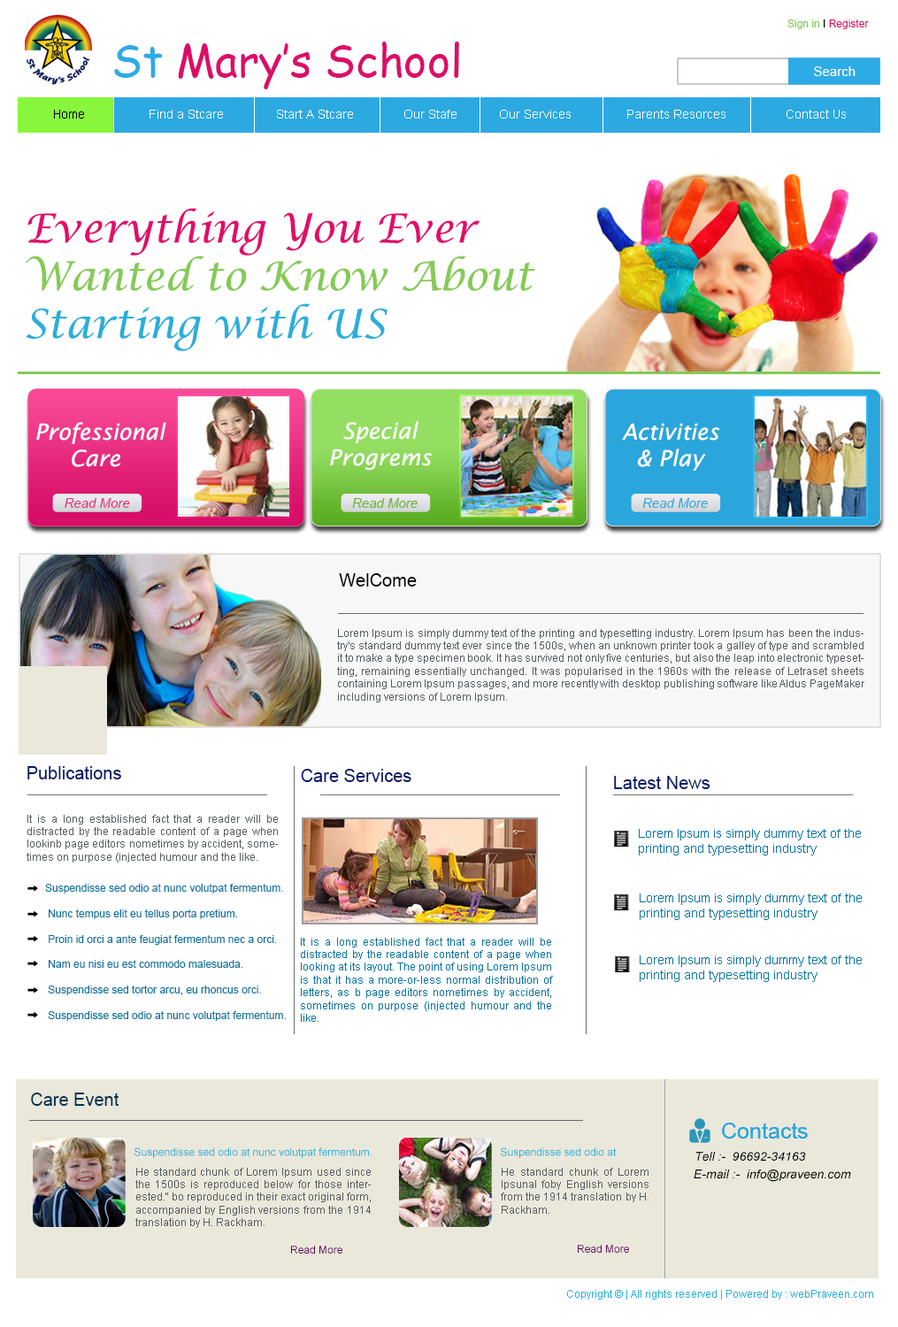
<style>
.page{position:relative;width:898px;height:1327px;background:#ffffff}
.page>*{position:absolute;margin:0}
.t1{font:10.6px "ArialMT";color:#e20d6a}
.t2{font:10.6px "ArialMT";color:#85ca55}
.t3{font:10.6px "ArialMT";color:#020400}
.t4{font:44.2px "ComicSansMS";color:#dc0d68}
.t5{font:44.2px "ComicSansMS";color:#2dabe6}
.t6{font:13.3px "ArialMT";color:#ffffff}
.t7{font:12.4px "ArialMT";color:#ffffff}
.t8{font:12.4px "ArialMT";color:#000000}
.t9{font:39.8px "LucidaCalligraphy-Italic";color:#85ca55}
.t10{font:39.8px "LucidaCalligraphy-Italic";color:#e20d6a}
.t11{font:39.8px "LucidaCalligraphy-Italic";color:#2aafda}
.t12{font:22.1px "LucidaSans-Italic";color:#ffffff}
.t13{font:13.3px "Arial-ItalicMT";color:#e72b7e}
.t14{font:13.3px "Arial-ItalicMT";color:#64b52c}
.t15{font:13.3px "Arial-ItalicMT";color:#2aa6dc}
.t16{font:17.7px "ArialMT";color:#000000}
.t17{font:10.6px "ArialMT";color:#595d5f}
.t18{font:17.7px "ArialMT";color:#031868}
.t19{font:12.4px "ArialMT";color:#0974a2}
.t20{font:10.6px "ArialMT";color:#0974a2}
.t21{font:17.7px "ArialMT";color:#003655}
.t22{font:22.1px "ArialMT";color:#2aa6dc}
.t23{font:10.6px "ArialMT";color:#2aafda}
.t24{font:12.4px "Arial-ItalicMT";color:#000101}
.t25{font:12.4px "Arial-ItalicMT";color:#000000}
.t26{font:10.6px "ArialMT";color:#680262}
</style>
<div class="page">
<p class="t1" style="left:788px;top:19px;width:81px;height:10px"><span class="t2">Sign in </span><span class="t3">I </span>Register</p>
<p class="t4" style="left:114px;top:42px;width:345px;height:47px"><span class="t5">St </span>Mary’s School</p>
<p class="t6" style="left:814px;top:66px;width:42px;height:10px">Search</p>
<p class="t7" style="left:54px;top:110px;width:792px;height:9px"><span class="t8">Home</span>  Find a Stcare  Start A Stcare  Our Stafe  Our Services  Parents Resorces   Contact Us</p>
<p class="t9" style="left:26px;top:208px;width:510px;height:143px;text-align:justify"><span class="t10">Everything You Ever<br></span>Wanted to Know About <br><span class="t11">Starting with US</span></p>
<p class="t12" style="left:36px;top:422px;width:130px;height:45px;text-align:justify">Professional <br>     Care</p>
<p class="t12" style="left:330px;top:421px;width:102px;height:50px;text-align:justify">Special<br>Progrems</p>
<p class="t12" style="left:622px;top:423px;width:97px;height:48px;text-align:justify">Activities <br>  &amp; Play</p>
<p class="t13" style="left:65px;top:498px;width:65px;height:10px">Read More</p>
<p class="t14" style="left:352px;top:498px;width:66px;height:10px">Read More</p>
<p class="t15" style="left:643px;top:498px;width:65px;height:10px">Read More</p>
<p class="t16" style="left:339px;top:573px;width:78px;height:14px">WelCome</p>
<p class="t17" style="left:337px;top:629px;width:528px;height:74px;text-align:justify">Lorem Ipsum is simply dummy text of the printing and typesetting industry. Lorem Ipsum has been the industry's standard dummy text ever since the 1500s, when an unknown printer took a galley of type and scrambled it to make a type specimen book. It has survived not only five centuries, but also the leap into electronic typesetting, remaining essentially unchanged. It was popularised in the 1960s with the release of Letraset sheets containing Lorem Ipsum passages, and more recently with desktop publishing software like Aldus PageMaker including versions of Lorem Ipsum.</p>
<p class="t18" style="left:27px;top:766px;width:94px;height:14px">Publications</p>
<p class="t18" style="left:301px;top:769px;width:111px;height:13px">Care Services</p>
<p class="t18" style="left:614px;top:776px;width:97px;height:13px">Latest News</p>
<p class="t17" style="left:27px;top:815px;width:251px;height:48px;text-align:justify">It is a long established fact that a reader will be distracted by the readable content of a page when lookinb page editors nometimes by accident, sometimes on purpose (injected humour and the like.</p>
<p class="t19" style="left:639px;top:829px;width:222px;height:27px;text-align:justify">Lorem Ipsum is simply dummy text of the <br>printing and typesetting industry</p>
<p class="t20" style="left:45px;top:884px;width:241px;height:137px;text-align:justify">Suspendisse sed odio at nunc volutpat fermentum.<br><br>    Nunc tempus elit eu tellus porta pretium.<br><br>    Proin id orci a ante feugiat fermentum nec a orci.<br><br>    Nam eu nisi eu est commodo malesuada.<br><br>    Suspendisse sed tortor arcu, eu rhoncus orci.<br><br>    Suspendisse sed odio at nunc volutpat fermentum.</p>
<p class="t19" style="left:640px;top:894px;width:222px;height:26px;text-align:justify">Lorem Ipsum is simply dummy text of the <br>printing and typesetting industry</p>
<p class="t20" style="left:301px;top:938px;width:252px;height:84px;text-align:justify">It is a long established fact that a reader will be distracted by the readable content of a page when looking at its layout. The point of using Lorem Ipsum is that it has a more-or-less normal distribution of letters, as b page editors nometimes by accident, sometimes on purpose (injected humour and the like.</p>
<p class="t19" style="left:640px;top:956px;width:222px;height:26px;text-align:justify">Lorem Ipsum is simply dummy text of the <br>printing and typesetting industry</p>
<p class="t21" style="left:31px;top:1093px;width:88px;height:13px">Care Event</p>
<p class="t22" style="left:722px;top:1123px;width:86px;height:16px">Contacts</p>
<p class="t22" style="left:722px;top:1123px;width:86px;height:16px">Contacts</p>
<p class="t23" style="left:135px;top:1148px;width:237px;height:10px">Suspendisse sed odio at nunc volutpat fermentum.</p>
<p class="t23" style="left:501px;top:1148px;width:116px;height:10px">Suspendisse sed odio at</p>
<p class="t24" style="left:696px;top:1152px;width:110px;height:10px">Tell :-  96692-34163</p>
<p class="t17" style="left:135px;top:1168px;width:236px;height:60px;text-align:justify">He standard chunk of Lorem Ipsum used since the 1500s is reproduced below for those interested." bo reproduced in their exact original form, accompanied by English versions from the 1914 translation by H. Rackham.</p>
<p class="t17" style="left:501px;top:1168px;width:148px;height:46px;text-align:justify">He standard chunk of Lorem Ipsunal foby English versions from the 1914 translation by H. Rackham.</p>
<p class="t25" style="left:694px;top:1170px;width:157px;height:12px">E-mail :-  info@praveen.com</p>
<p class="t26" style="left:291px;top:1246px;width:51px;height:8px">Read More</p>
<p class="t26" style="left:578px;top:1245px;width:51px;height:8px">Read More</p>
<p class="t23" style="left:567px;top:1290px;width:306px;height:10px">Copyright © | All rights reserved | Powered by : webPraveen.com</p>
</div>
